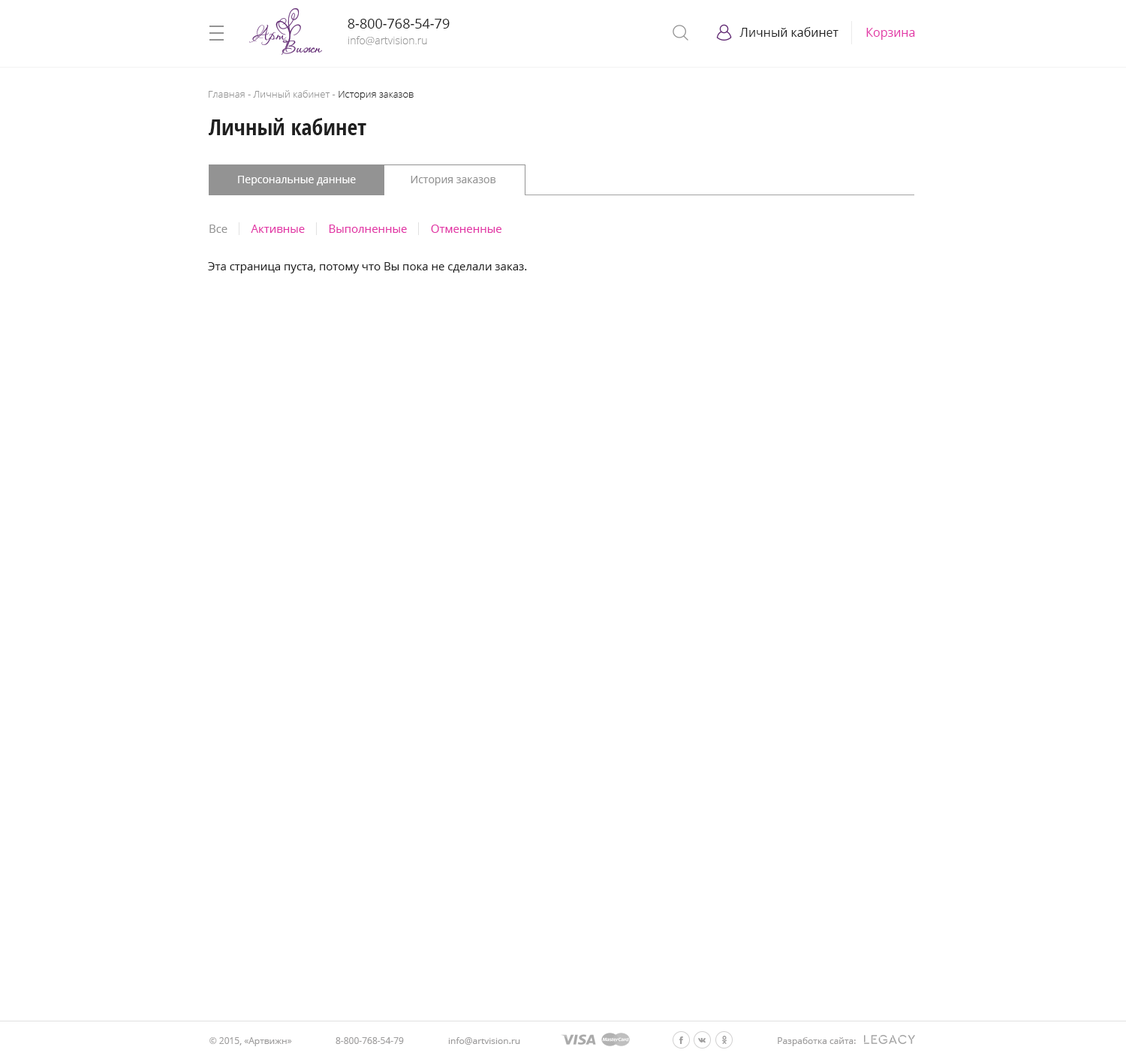
<style>
.page{position:relative;width:1126px;height:1059px;background:#ffffff}
.page>*{position:absolute;margin:0}
.t1{font:13.5px "OpenSans";color:#202020}
.t2{font:12px "OpenSans";color:#202020}
.t3{font:12px "OpenSans";color:#e233a6}
.t4{font:10.5px "OpenSans-Light";color:#999999}
.t5{font:9.8px "OpenSans-Light";color:#939393}
.t6{font:9.8px "OpenSans-Light";color:#202020}
.t7{font:22.5px "OpenSans-CondensedBold";color:#202020}
.t8{font:10.5px "OpenSans";color:#ffffff}
.t9{font:10.5px "OpenSans";color:#939393}
.t10{font:11.3px "OpenSans";color:#e233a6}
.t11{font:11.3px "OpenSans";color:#939393}
.t12{font:11.3px "OpenSans";color:#202020}
.t13{font:9px "OpenSans";color:#9e9d9d}
</style>
<div class="page">
<p class="t1" style="left:348px;top:19px;width:102px;height:10px">8-800-768-54-79</p>
<p class="t2" style="left:740px;top:27px;width:99px;height:10px">Личный кабинет</p>
<p class="t3" style="left:866px;top:28px;width:49px;height:12px">Корзина</p>
<p class="t4" style="left:348px;top:36px;width:79px;height:9px">info@artvision.ru</p>
<p class="t5" style="left:209px;top:90px;width:205px;height:10px">Главная - Личный кабинет - <span class="t6">История заказов</span></p>
<p class="t7" style="left:209px;top:118px;width:157px;height:17px">Личный кабинет</p>
<p class="t8" style="left:238px;top:176px;width:118px;height:9px">Персональные данные</p>
<p class="t9" style="left:411px;top:176px;width:85px;height:9px">История заказов</p>
<p class="t10" style="left:209px;top:225px;width:293px;height:8px"><span class="t11">Все        </span>Активные        Выполненные        Отмененные</p>
<p class="t12" style="left:208px;top:262px;width:319px;height:11px">Эта страница пуста, потому что Вы пока не сделали заказ.</p>
<p class="t13" style="left:209px;top:1037px;width:83px;height:9px">© 2015, «Артвижн»</p>
<p class="t13" style="left:336px;top:1037px;width:68px;height:7px">8-800-768-54-79</p>
<p class="t13" style="left:448px;top:1037px;width:72px;height:7px">info@artvision.ru</p>
<p class="t13" style="left:778px;top:1037px;width:78px;height:9px">Разработка сайта:</p>
</div>
